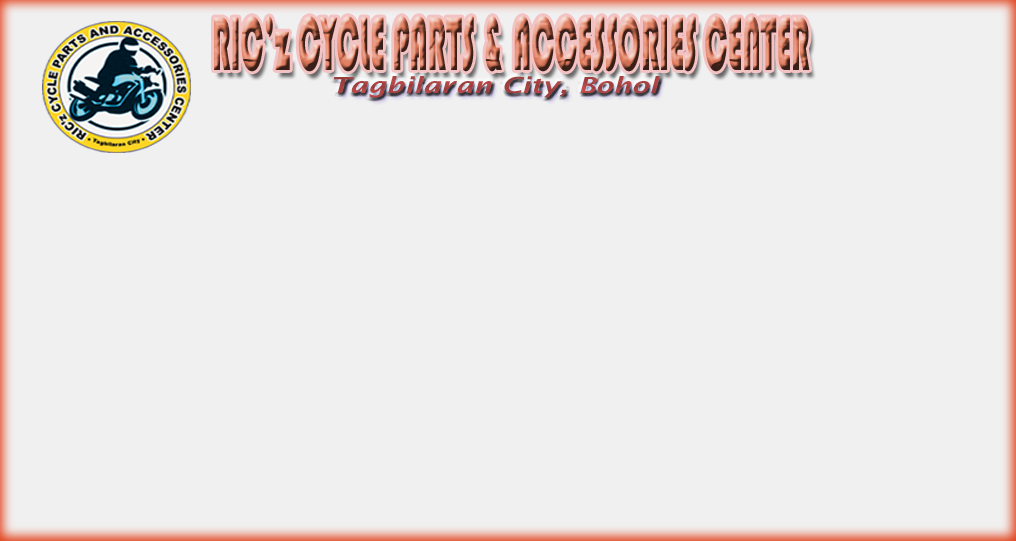
<style>
.page{position:relative;width:1016px;height:541px;background:#f0f0f0}
.page>*{position:absolute;margin:0}
.t1{font:78.7px "Bauhaus93";scale:0.39 1}
.t2{font:22.1px "LucidaSans-DemiItalic";color:#a94242;scale:1.29 1}
</style>
<div class="page">
<p class="t1" style="left:214px;top:16px;width:596px;height:56px">RIC’z CYCLE PARTS &amp; ACCESSORIES CENTER</p>
<p class="t2" style="left:333px;top:76px;width:327px;height:22px">Tagbilaran City, Bohol</p>
</div>
